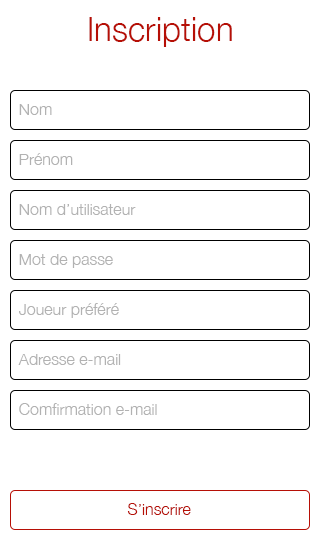
<style>
.page{position:relative;width:320px;height:540px;background:#ffffff}
.page>*{position:absolute;margin:0}
.t1{font:33.3px "HelveticaNeue-Light";color:#b60f06}
.t2{font:16px "HelveticaNeue-Light";color:#b2b2b2}
.t3{font:16px "HelveticaNeue-Light";color:#b60f06}
</style>
<div class="page">
<p class="t1" style="left:89px;top:17px;width:143px;height:30px">Inscription</p>
<p class="t2" style="left:19px;top:104px;width:33px;height:11px">Nom</p>
<p class="t2" style="left:19px;top:153px;width:54px;height:12px">Prénom</p>
<p class="t2" style="left:19px;top:204px;width:117px;height:11px">Nom d’utilisateur</p>
<p class="t2" style="left:19px;top:254px;width:94px;height:14px">Mot de passe</p>
<p class="t2" style="left:19px;top:303px;width:100px;height:15px">Joueur préféré</p>
<p class="t2" style="left:18px;top:354px;width:103px;height:11px">Adresse e-mail</p>
<p class="t2" style="left:19px;top:403px;width:138px;height:12px">Comfirmation e-mail</p>
<p class="t3" style="left:127px;top:503px;width:64px;height:12px">S’inscrire</p>
</div>
